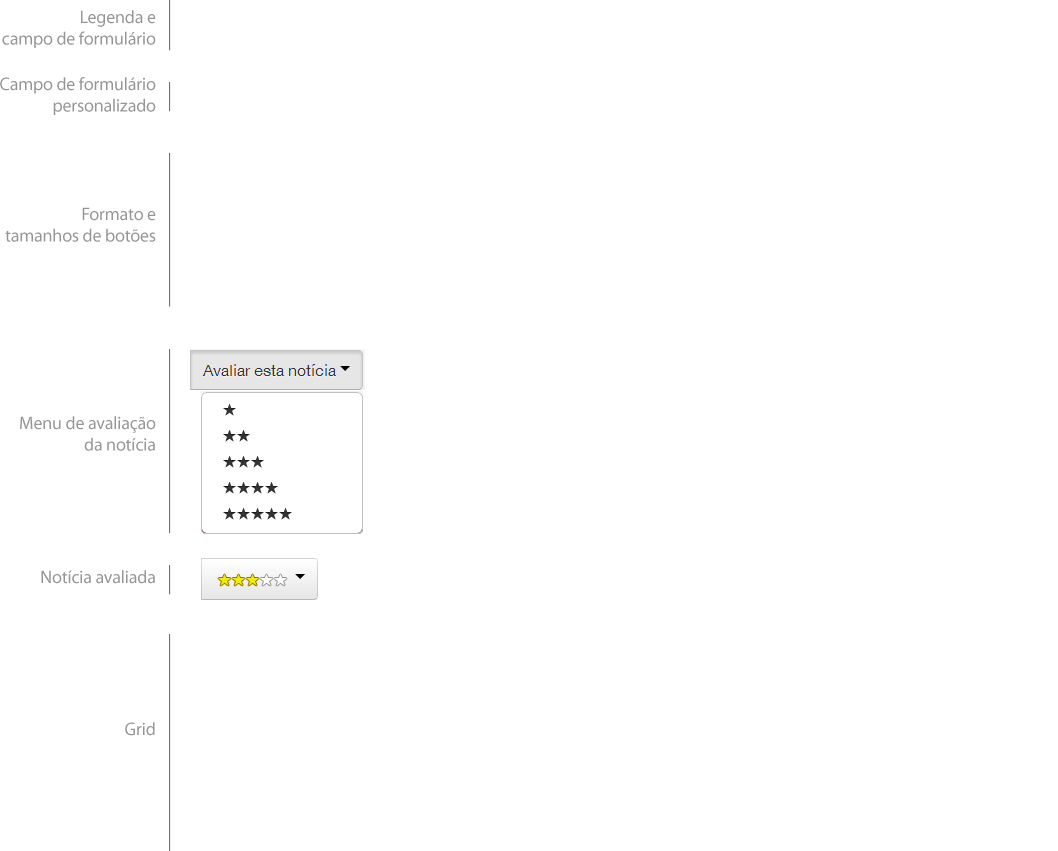
<style>
.page{position:relative;width:1058px;height:851px;background:#ffffff}
.page>*{position:absolute;margin:0}
.t1{font:18px "MyriadPro-Regular";letter-spacing:-0.01em;color:#969494}
</style>
<div class="page">
<p class="t1" style="left:2px;top:10px;width:154px;height:38px;text-align:right">Legenda e<br>campo de formulário</p>
<p class="t1" style="left:0px;top:77px;width:156px;height:38px;text-align:right">Campo de formulário<br>personalizado</p>
<p class="t1" style="left:5px;top:207px;width:151px;height:35px;text-align:right">Formato e<br>tamanhos de botões</p>
<p class="t1" style="left:20px;top:416px;width:136px;height:35px;text-align:right">Menu de avaliação<br>da notícia</p>
<p class="t1" style="left:41px;top:570px;width:114px;height:14px">Notícia avaliada</p>
<p class="t1" style="left:125px;top:722px;width:30px;height:14px">Grid</p>
</div>
